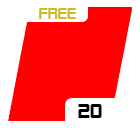
<style>
.page{position:relative;width:140px;height:128px;background:#ff0000}
.page>*{position:absolute;margin:0}
.t1{font:15px "AlienEncountersSolid";color:#d0ba23}
.t2{font:20px "AlienEncountersSolid";color:#000000}
</style>
<div class="page">
<p class="t1" style="left:39px;top:8px;width:37px;height:11px">FREE</p>
<p class="t2" style="left:78px;top:104px;width:24px;height:14px">20</p>
</div>
